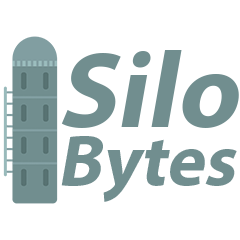
<style>
.page{position:relative;width:240px;height:240px;background:#ffffff}
.page>*{position:absolute;margin:0}
.t1{font:73px/58.4px "MyriadPro-Bold";color:#718e8f;font-style:italic}
.t2{font:108.2px/58.4px "MyriadPro-Bold";color:#718e8f;font-style:italic}
</style>
<div class="page">
<p class="t1" style="left:61px;top:50px;width:178px;height:152px"><span class="t2">Silo<br></span>Bytes</p>
</div>
